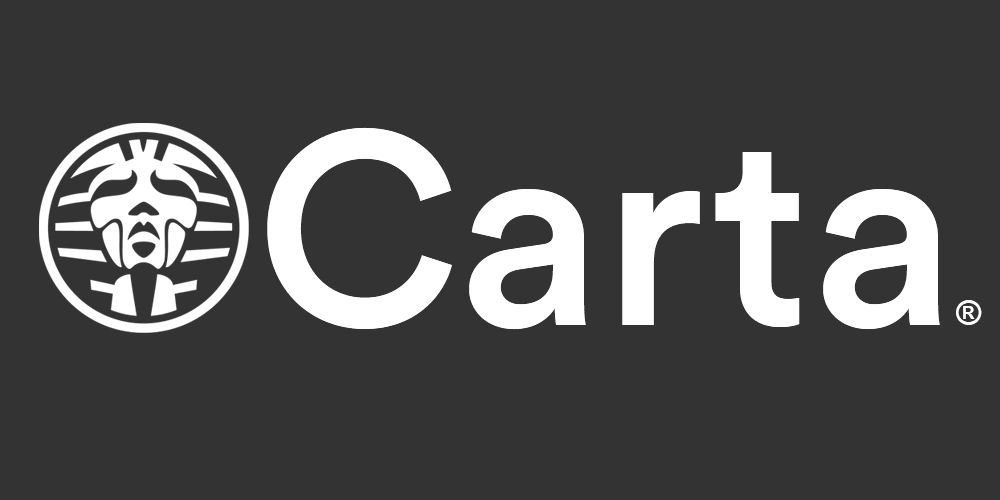
<style>
.page{position:relative;width:1000px;height:500px;background:#333333}
.page>*{position:absolute;margin:0}
.t1{font:271.7px "CircularPro-Medium";color:#ffffff}
.t2{font:34px "Arial-BoldMT";color:#ffffff}
</style>
<div class="page">
<p class="t1" style="left:267px;top:127px;width:715px;height:203px">Carta<span class="t2">®</span></p>
</div>
